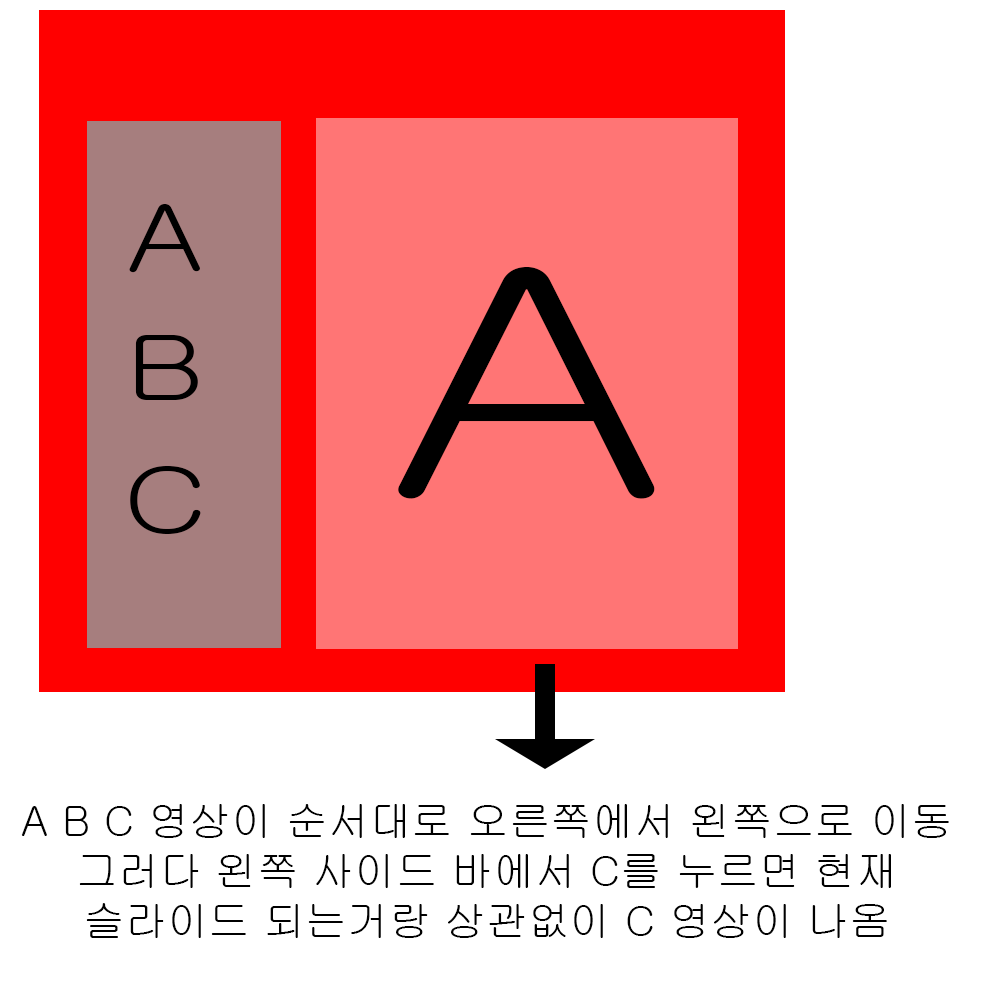
<style>
.page{position:relative;width:1000px;height:1000px;background:#ffffff}
.page>*{position:absolute;margin:0}
.t1{font:90px "Gulim";color:#000000;scale:1.3 1}
.t2{font:308.8px "Gulim";color:#000000;scale:1.38 1}
.t3{font:41.7px "Gulim";color:#000000}
</style>
<div class="page">
<p class="t1" style="left:129px;top:204px;width:71px;height:69px">A</p>
<p class="t2" style="left:398px;top:267px;width:257px;height:232px">A</p>
<p class="t1" style="left:135px;top:335px;width:63px;height:65px">B</p>
<p class="t1" style="left:130px;top:466px;width:71px;height:68px">C</p>
<p class="t3" style="left:21px;top:804px;width:928px;height:134px;text-align:center">A B C 영상이 순서대로 오른쪽에서 왼쪽으로 이동<br>그러다 왼쪽 사이드 바에서 C를 누르면 현재<br>슬라이드 되는거랑 상관없이 C 영상이 나옴</p>
</div>
